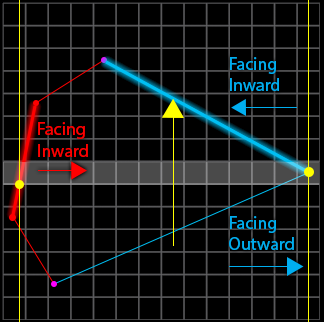
<style>
.page{position:relative;width:324px;height:322px;background:#000000}
.page>*{position:absolute;margin:0}
.t1{font:18px "MyriadPro-Regular";color:#00aeef}
.t2{font:18px "MyriadPro-Regular";color:#ff0000}
</style>
<div class="page">
<p class="t1" style="left:230px;top:57px;width:49px;height:34px">Facing Inward</p>
<p class="t2" style="left:38px;top:122px;width:50px;height:35px">Facing Inward</p>
<p class="t1" style="left:229px;top:216px;width:65px;height:34px">Facing Outward</p>
</div>
